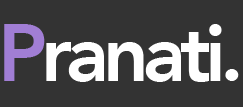
<style>
.page{position:relative;width:243px;height:107px;background:#333333}
.page>*{position:absolute;margin:0}
.t1{font:80px "Avenir-Heavy";letter-spacing:-0.075em;color:#ffffff}
.t2{font:80px "Avenir-Heavy";letter-spacing:-0.075em;color:#a17ed5}
</style>
<div class="page">
<p class="t1" style="left:4px;top:24px;width:235px;height:58px"><span class="t2">P</span>ranati.</p>
</div>
